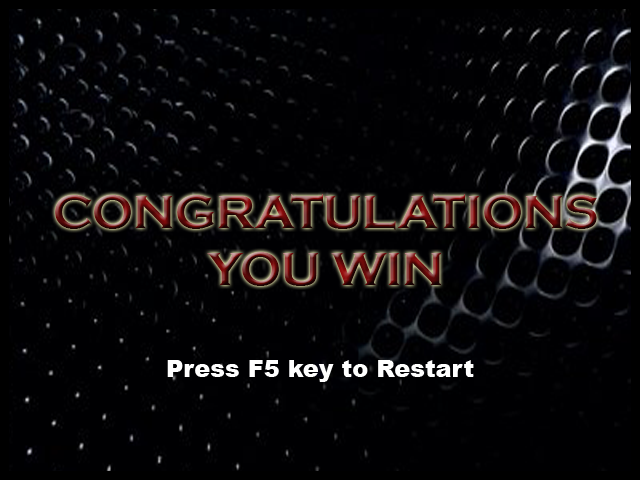
<style>
.page{position:relative;width:640px;height:480px;background:#000002}
.page>*{position:absolute;margin:0}
.t1{font:48px "CopperplateGothic-Bold"}
.t2{font:24px "Arial-Black";color:#ffffff}
.t3{font:18px "Arial-Black";color:#ff0000}
</style>
<div class="page">
<p class="t1" style="left:55px;top:194px;width:542px;height:92px;text-align:center">CONGRATULATIONS<br>YOU WIN</p>
<p class="t2" style="left:167px;top:360px;width:307px;height:22px"><span class="t3"><br></span>Press F5 key to Restart</p>
</div>
